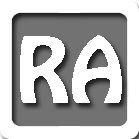
<style>
.page{position:relative;width:139px;height:139px;background:#ffffff}
.page>*{position:absolute;margin:0}
.t1{font:80px "HoboStd";color:#ffffff}
</style>
<div class="page">
<p class="t1" style="left:20px;top:35px;width:102px;height:68px">RA</p>
</div>
